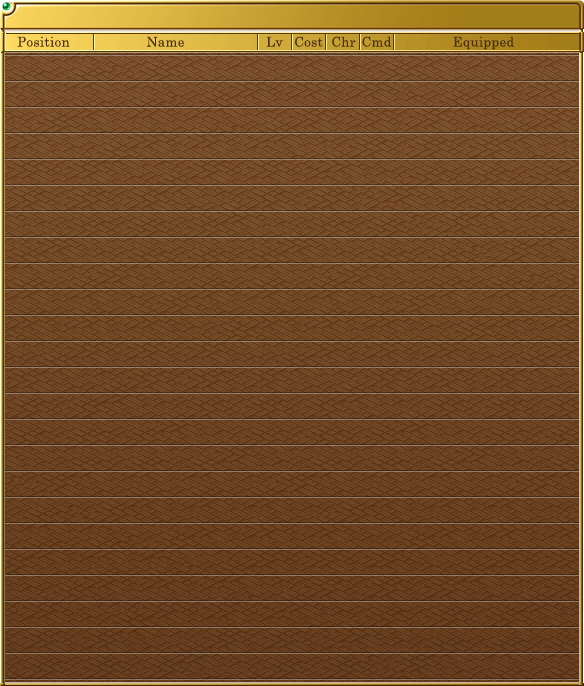
<style>
.page{position:relative;width:584px;height:686px}
.page>*{position:absolute;margin:0}
.t1{font:13.3px "CenturySchoolbook";letter-spacing:0.025em;color:#4b310f}
</style>
<div class="page">
<p class="t1" style="left:17px;top:36px;width:53px;height:11px">Position</p>
<p class="t1" style="left:147px;top:36px;width:37px;height:11px">Name</p>
<p class="t1" style="left:266px;top:36px;width:17px;height:11px">Lv</p>
<p class="t1" style="left:295px;top:36px;width:28px;height:11px">Cost</p>
<p class="t1" style="left:332px;top:36px;width:24px;height:11px">Chr</p>
<p class="t1" style="left:362px;top:36px;width:30px;height:11px">Cmd</p>
<p class="t1" style="left:453px;top:36px;width:61px;height:14px">Equipped</p>
</div>
